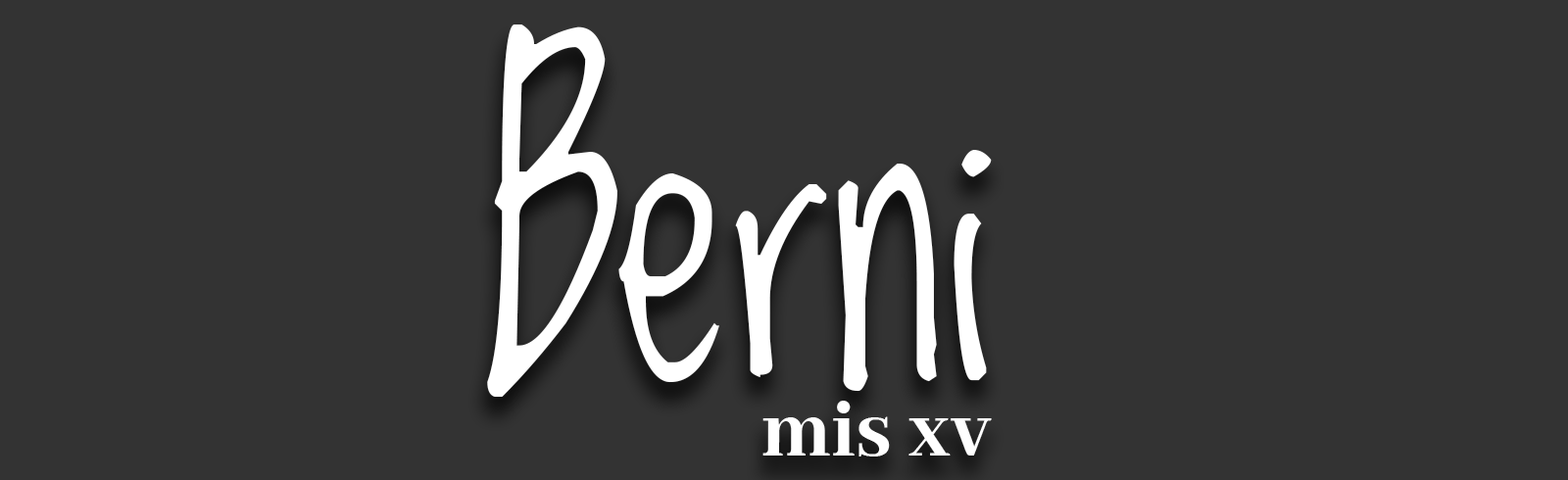
<style>
.page{position:relative;width:1568px;height:480px;background:#333333}
.page>*{position:absolute;margin:0}
.t1{font:333.8px "LovedbytheKing";color:#ffffff}
.t2{font:88.2px "AbhayaLibre-ExtraBold";color:#ffffff}
</style>
<div class="page">
<p class="t1" style="left:487px;top:24px;width:505px;height:373px">Berni</p>
<p class="t2" style="left:762px;top:401px;width:230px;height:56px">mis xv</p>
</div>
